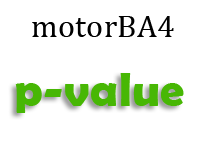
<style>
.page{position:relative;width:200px;height:150px;background:#ffffff}
.page>*{position:absolute;margin:0}
.t1{font:32px "Cambria";letter-spacing:0.01em;color:#000000}
.t2{font:48px "BerlinSansFBDemi-Bold";letter-spacing:0.01em;color:#47b704}
</style>
<div class="page">
<p class="t1" style="left:32px;top:16px;width:142px;height:21px">motorBA4</p>
<p class="t2" style="left:15px;top:73px;width:169px;height:40px">p-value</p>
</div>
